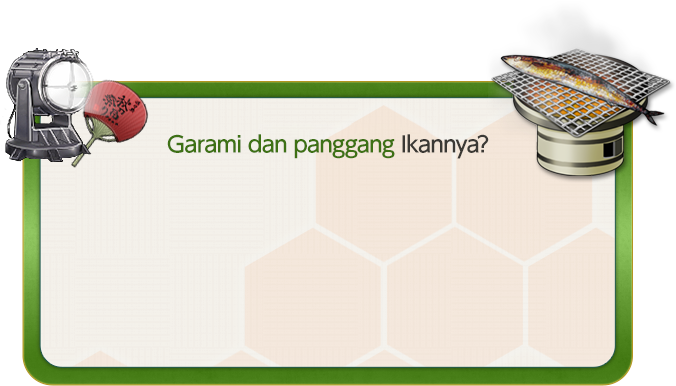
<style>
.page{position:relative;width:676px;height:386px;background:#ffffff}
.page>*{position:absolute;margin:0}
.t1{font:22px "UDShinGoPro-Medium";letter-spacing:-0.04em;color:#3e7115}
.t2{font:22px "UDShinGoPro-Medium";letter-spacing:-0.04em;color:#3b3935}
</style>
<div class="page">
<p class="t1" style="left:167px;top:134px;width:322px;height:25px">Garami dan panggang<span class="t2"> Ikannya?</span></p>
</div>
